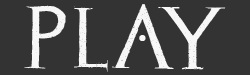
<style>
.page{position:relative;width:250px;height:75px;background:#333333}
.page>*{position:absolute;margin:0}
.t1{font:66.7px "Archeologicaps";color:#f7f7f7;text-transform:uppercase}
</style>
<div class="page">
<p class="t1" style="left:24px;top:4px;width:202px;height:68px">play</p>
</div>
